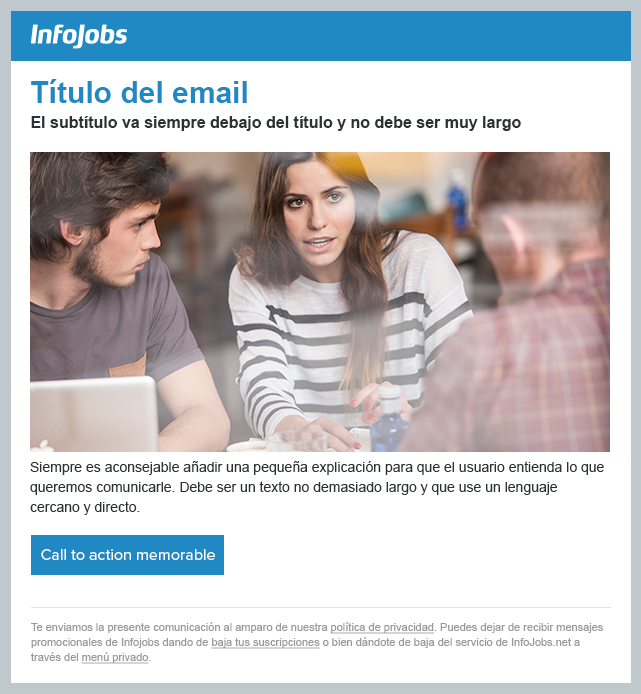
<style>
.page{position:relative;width:641px;height:694px;background:#ffffff}
.page>*{position:absolute;margin:0}
.t1{font:16px/25px "Arial-BoldMT";color:#2d3133}
.t2{font:30px/15px "Arial-BoldMT";color:#2088c2}
.t3{font:14px/20px "ArialMT";color:#2d3133}
.t4{font:16px "ProximaNova-Regular";color:#ffffff}
.t5{font:11px/15px "ArialMT";color:#999999}
.t6{font:11px/15px "ArialMT";color:#999999;text-decoration:underline}
</style>
<div class="page">
<p class="t1" style="left:31px;top:79px;width:490px;height:52px"><span class="t2">Título del email<br></span>El subtítulo va siempre debajo del título y no debe ser muy largo</p>
<p class="t3" style="left:30px;top:461px;width:574px;height:54px">Siempre es aconsejable añadir una pequeña explicación para que el usuario entienda lo que queremos comunicarle. Debe ser un texto no demasiado largo y que use un lenguaje cercano y directo.</p>
<p class="t4" style="left:41px;top:549px;width:174px;height:11px">Call to action memorable</p>
<p class="t5" style="left:31px;top:622px;width:572px;height:42px">Te enviamos la presente comunicación al amparo de nuestra <span class="t6">política de privacidad</span>. Puedes dejar de recibir mensajes promocionales de Infojobs dando de <span class="t6">baja tus suscripciones</span> o bien dándote de baja del servicio de InfoJobs.net a través del <span class="t6">menú privado</span>.</p>
</div>
